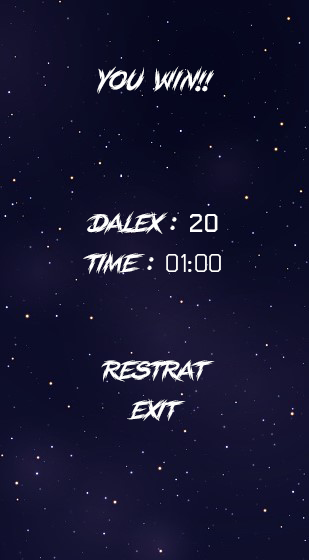
<style>
.page{position:relative;width:309px;height:560px}
.page>*{position:absolute;margin:0}
.t1{font:25px "LetricPERSONALUSEONLY-Regular";color:#fefefe}
.t2{font:41.7px "THChakraPetch-Bold";color:#fefefe}
.t3{font:41.7px "THChakraPetch";color:#fefefe}
</style>
<div class="page">
<p class="t1" style="left:97px;top:66px;width:117px;height:28px">you win!!</p>
<p class="t1" style="left:86px;top:211px;width:132px;height:24px">Dalex : <span class="t2">20</span></p>
<p class="t1" style="left:83px;top:251px;width:138px;height:24px">time : <span class="t3">01:00</span></p>
<p class="t1" style="left:101px;top:359px;width:114px;height:23px">restrat</p>
<p class="t1" style="left:127px;top:398px;width:59px;height:23px">exit</p>
</div>
